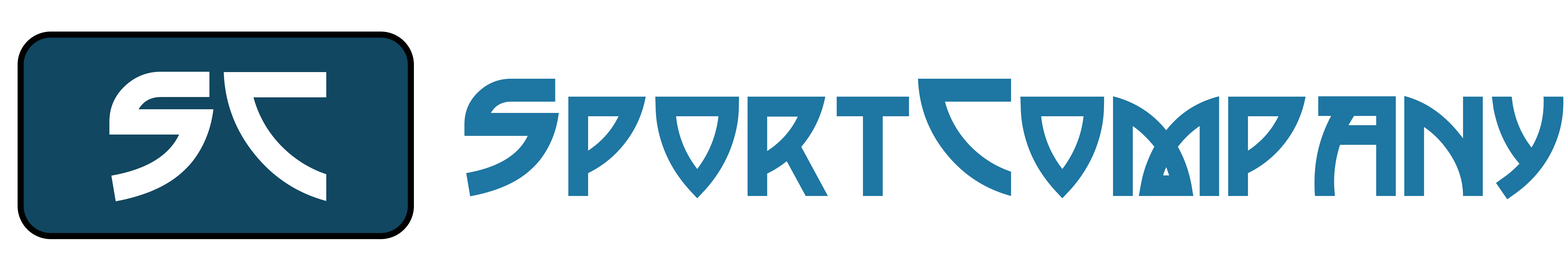
<style>
.page{position:relative;width:1568px;height:273px;background:#ffffff}
.page>*{position:absolute;margin:0}
.t1{font:179.8px "PostmodernOne";color:#ffffff}
.t2{font:163.2px "PostmodernOne";color:#1e76a2}
</style>
<div class="page">
<p class="t1" style="left:109px;top:72px;width:217px;height:129px">SC</p>
<p class="t2" style="left:464px;top:79px;width:1099px;height:120px">SportCompany</p>
</div>
